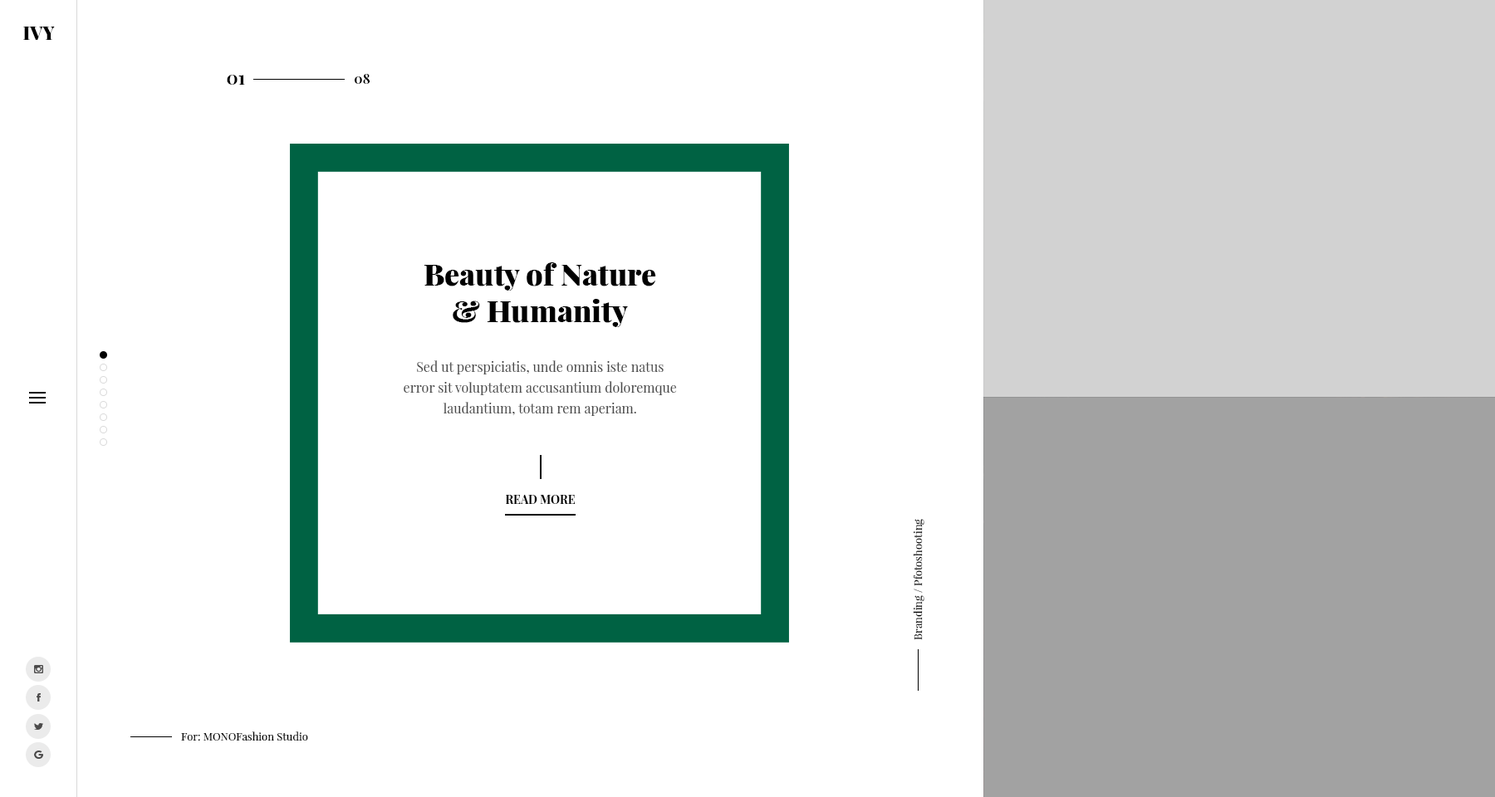
<style>
.page{position:relative;width:1495px;height:797px;background:#ffffff}
.page>*{position:absolute;margin:0}
.t1{font:18.3px "PlayfairDisplay-Black";color:#000000}
.t2{font:18.3px "PlayfairDisplay-Bold";color:#000000}
.t3{font:13.3px "PlayfairDisplay-Bold";color:#000000}
.t4{font:29.9px/36.6px "PlayfairDisplay-Black";color:#000000}
.t5{font:13.3px/20.8px "PlayfairDisplay-Regular";color:#494949}
.t6{font:11.6px "PlayfairDisplay-Bold";color:#000000}
.t7{font:10.6px "PlayfairDisplay-Regular";color:#000000}
.t8{font:10.8px "PlayfairDisplay-Regular";color:#000000}
</style>
<div class="page">
<p class="t1" style="left:23px;top:27px;width:32px;height:13px">IVY</p>
<p class="t2" style="left:227px;top:75px;width:18px;height:10px">01</p>
<p class="t3" style="left:355px;top:74px;width:15px;height:10px">08</p>
<p class="t4" style="left:424px;top:263px;width:232px;height:64px;text-align:center">Beauty of Nature &amp; Humanity</p>
<p class="t5" style="left:404px;top:361px;width:273px;height:55px;text-align:center">Sed ut perspiciatis, unde omnis iste natus error sit voluptatem accusantium doloremque laudantium, totam rem aperiam.</p>
<p class="t6" style="left:506px;top:495px;width:70px;height:9px">READ MORE</p>
<p class="t7" style="left:913px;top:519px;width:12px;height:121px;rotate:-90deg">Branding / Pfotoshooting</p>
<p class="t8" style="left:181px;top:732px;width:127px;height:9px">For: MONOFashion Studio</p>
</div>
